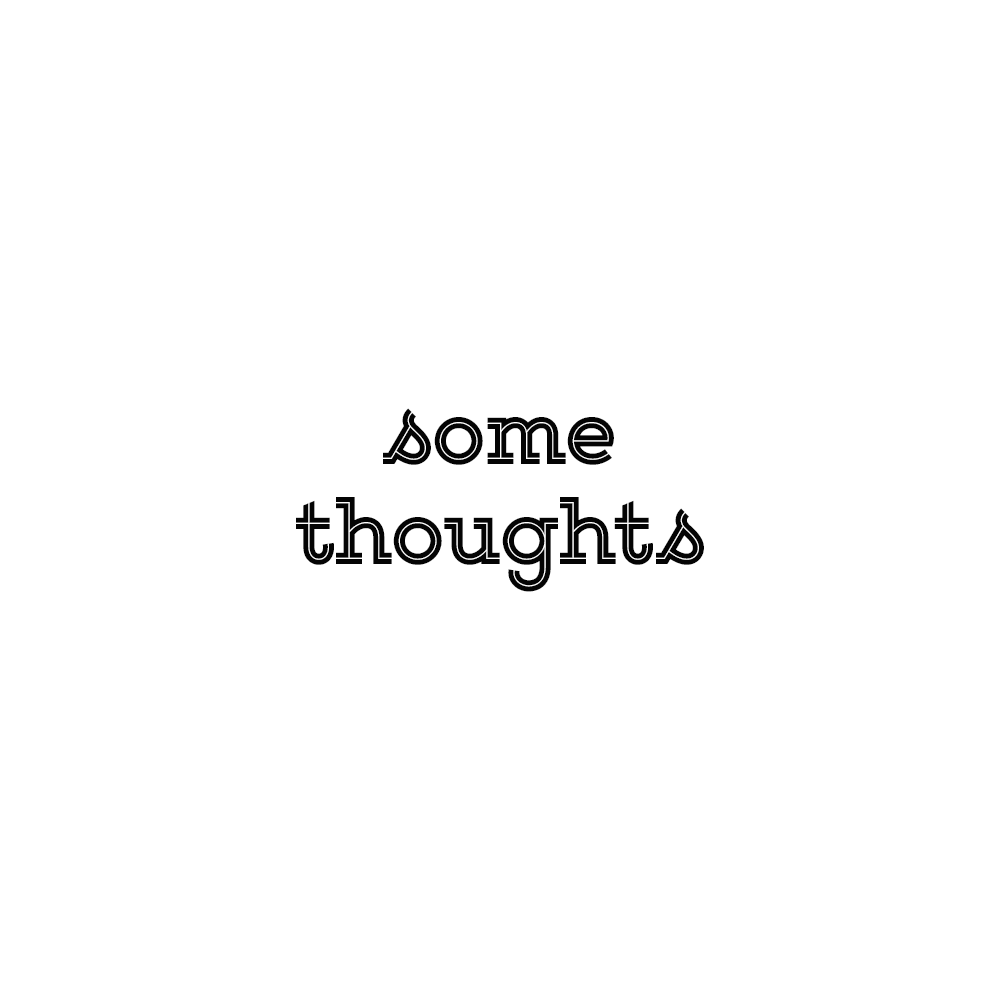
<style>
.page{position:relative;width:1000px;height:1000px;background:#ffffff}
.page>*{position:absolute;margin:0}
.t1{font:83.3px "GistUprightExtraboldDemo";color:#040404}
</style>
<div class="page">
<p class="t1" style="left:295px;top:408px;width:409px;height:184px;text-align:center">some<br>thoughts</p>
</div>
